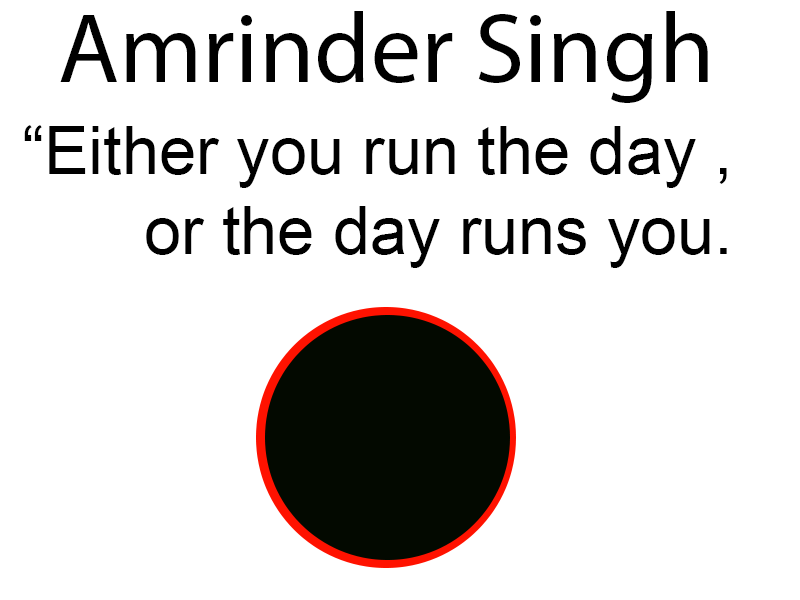
<style>
.page{position:relative;width:800px;height:600px;background:#ffffff}
.page>*{position:absolute;margin:0}
.t1{font:100px "MyriadPro-Regular";color:#000000}
.t2{font:66.7px "ArialMT";color:#000000}
</style>
<div class="page">
<p class="t1" style="left:60px;top:11px;width:648px;height:92px">Amrinder Singh</p>
<p class="t2" style="left:24px;top:125px;width:703px;height:143px;text-align:right">“Either you run the day ,<br>or the day runs you.</p>
</div>
